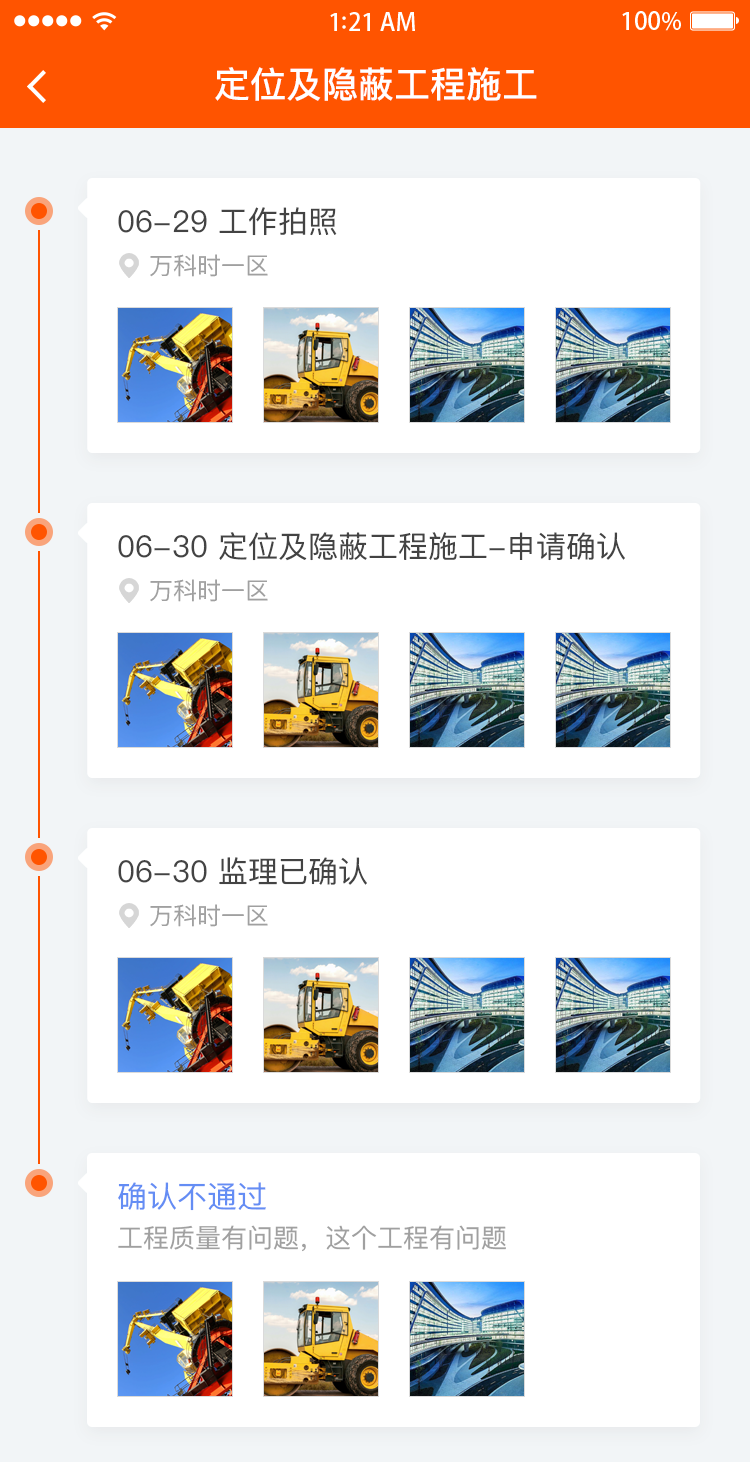
<style>
.page{position:relative;width:750px;height:1462px;background:#ffffff}
.page>*{position:absolute;margin:0}
.t1{font:36px "PingFangSC-Medium";color:#ffffff}
.t2{font:30px "PingFangSC-Regular";color:#434343}
.t3{font:24px "PingFangSC-Regular";color:#a0a0a0}
.t4{font:26px/44px "PingFangSC-Regular";color:#a0a0a0}
.t5{font:30px/44px "PingFangSC-Regular";color:#648df4}
</style>
<div class="page">
<p class="t1" style="left:215px;top:67px;width:322px;height:34px">定位及隐蔽工程施工</p>
<p class="t2" style="left:118px;top:207px;width:219px;height:29px">06-29 工作拍照</p>
<p class="t3" style="left:150px;top:254px;width:118px;height:23px">万科时一区</p>
<p class="t2" style="left:118px;top:532px;width:507px;height:29px">06-30 定位及隐蔽工程施工-申请确认</p>
<p class="t3" style="left:150px;top:579px;width:118px;height:23px">万科时一区</p>
<p class="t2" style="left:118px;top:857px;width:249px;height:28px">06-30 监理已确认</p>
<p class="t3" style="left:150px;top:904px;width:118px;height:23px">万科时一区</p>
<p class="t4" style="left:118px;top:1182px;width:388px;height:70px"><span class="t5">确认不通过<br></span>工程质量有问题，这个工程有问题</p>
</div>
